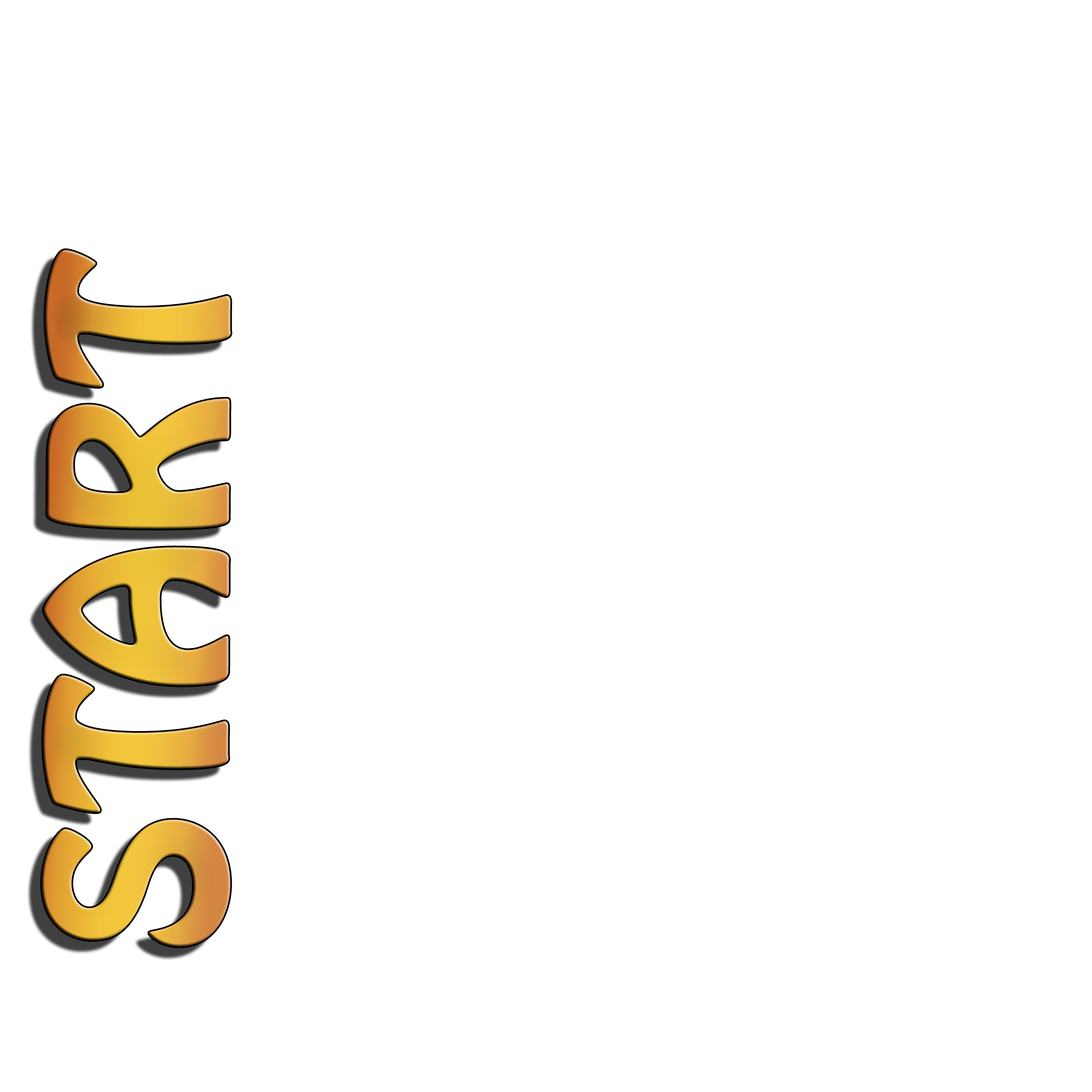
<style>
.page{position:relative;width:1092px;height:1092px;background:#ffffff}
.page>*{position:absolute;margin:0}
.t1{font:218.4px "HoboStd"}
</style>
<div class="page">
<p class="t1" style="left:41px;top:250px;width:190px;height:697px;rotate:-90deg">START</p>
</div>
